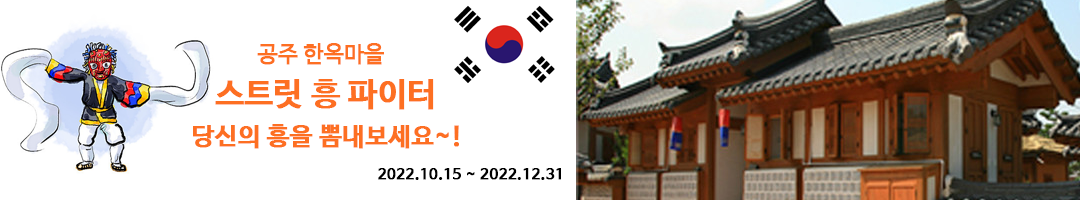
<style>
.page{position:relative;width:1080px;height:200px;background:#ffffff}
.page>*{position:absolute;margin:0}
.t1{font:22px "NanumBarunGothic";color:#fd6f22;font-weight:bold}
.t2{font:32px "NanumBarunGothicBold";color:#fd6f22;font-weight:bold}
.t3{font:25px "NanumBarunGothicBold";color:#fd6f22;font-weight:bold}
.t4{font:15.2px "NanumBarunGothicBold";color:#000000;font-weight:bold}
</style>
<div class="page">
<p class="t1" style="left:257px;top:43px;width:127px;height:22px">공주 한옥마을</p>
<p class="t2" style="left:215px;top:79px;width:219px;height:31px">스트릿 흥 파이터</p>
<p class="t3" style="left:193px;top:124px;width:266px;height:25px">당신의 흥을 뽐내보세요~!</p>
<p class="t4" style="left:378px;top:168px;width:183px;height:12px">2022.10.15 ~ 2022.12.31</p>
</div>
